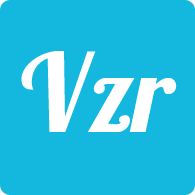
<style>
.page{position:relative;width:195px;height:195px;background:#14b8de}
.page>*{position:absolute;margin:0}
.t1{font:108px "Lobster-Regular";color:#ffffff}
</style>
<div class="page">
<p class="t1" style="left:21px;top:51px;width:156px;height:81px">Vzr</p>
</div>
